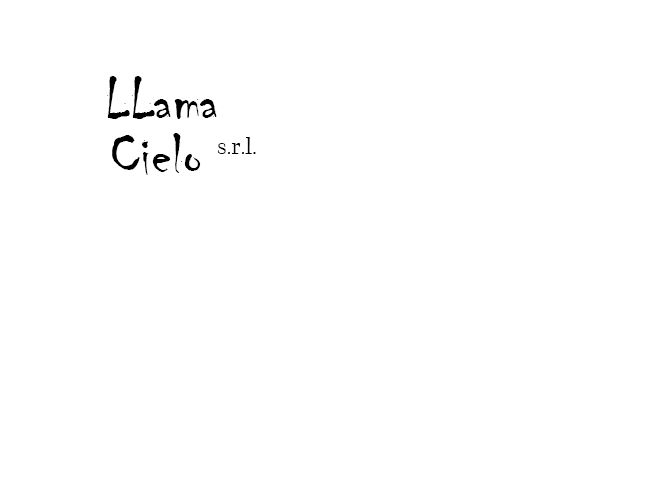
<style>
.page{position:relative;width:646px;height:483px;background:#ffffff}
.page>*{position:absolute;margin:0}
.t1{font:60px "Chiller-Regular";color:#000000}
.t2{font:24px "CalifornianFB-Reg";color:#000000}
</style>
<div class="page">
<p class="t1" style="left:107px;top:76px;width:110px;height:43px">LLama</p>
<p class="t1" style="left:112px;top:133px;width:89px;height:42px">Cielo</p>
<p class="t2" style="left:217px;top:137px;width:39px;height:17px">s.r.l.</p>
</div>
